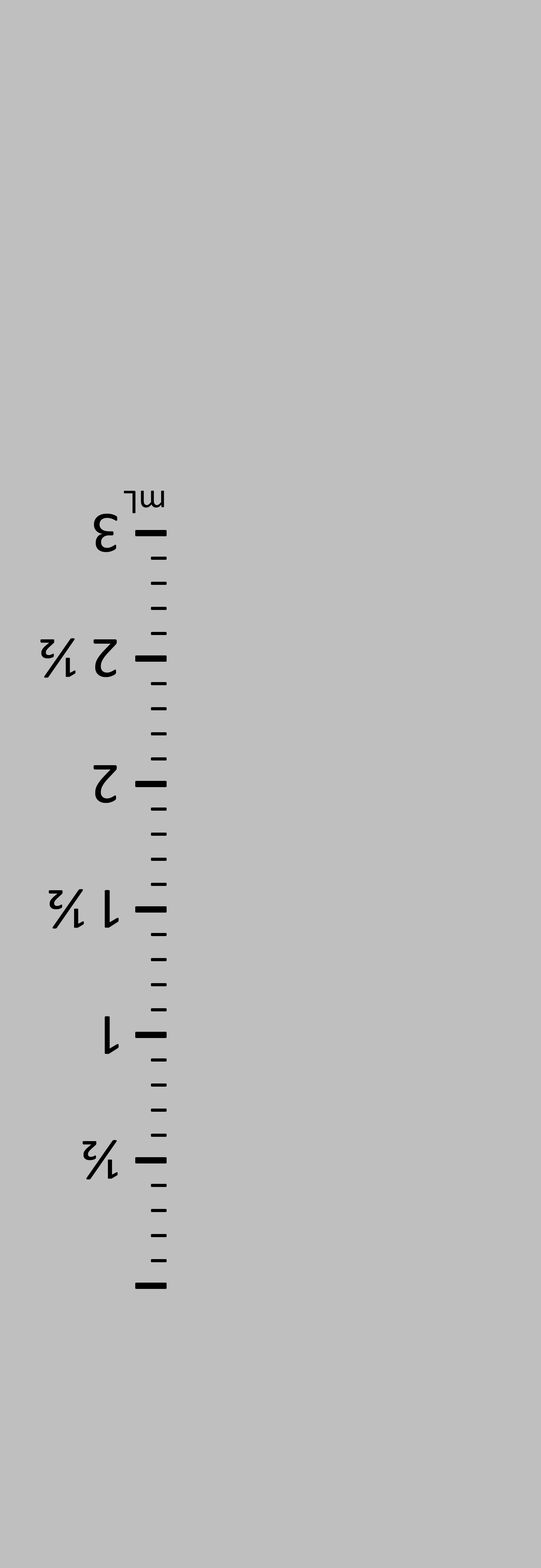
<style>
.page{position:relative;width:541px;height:1568px;background:#bfbfbf}
.page>*{position:absolute;margin:0}
.t1{font:35.3px "Calibri";color:#000000}
.t2{font:58.8px "Calibri";color:#000000}
</style>
<div class="page">
<p class="t1" style="left:124px;top:490px;width:40px;height:24px;rotate:180deg">mL</p>
<p class="t2" style="left:94px;top:514px;width:23px;height:38px;rotate:180deg">3</p>
<p class="t2" style="left:40px;top:638px;width:77px;height:40px;rotate:180deg">2 ½</p>
<p class="t2" style="left:93px;top:765px;width:24px;height:38px;rotate:180deg">2</p>
<p class="t2" style="left:49px;top:889px;width:70px;height:40px;rotate:180deg">1 ½</p>
<p class="t2" style="left:105px;top:1016px;width:14px;height:38px;rotate:180deg">1</p>
<p class="t2" style="left:82px;top:1140px;width:36px;height:40px;rotate:180deg">½</p>
</div>
